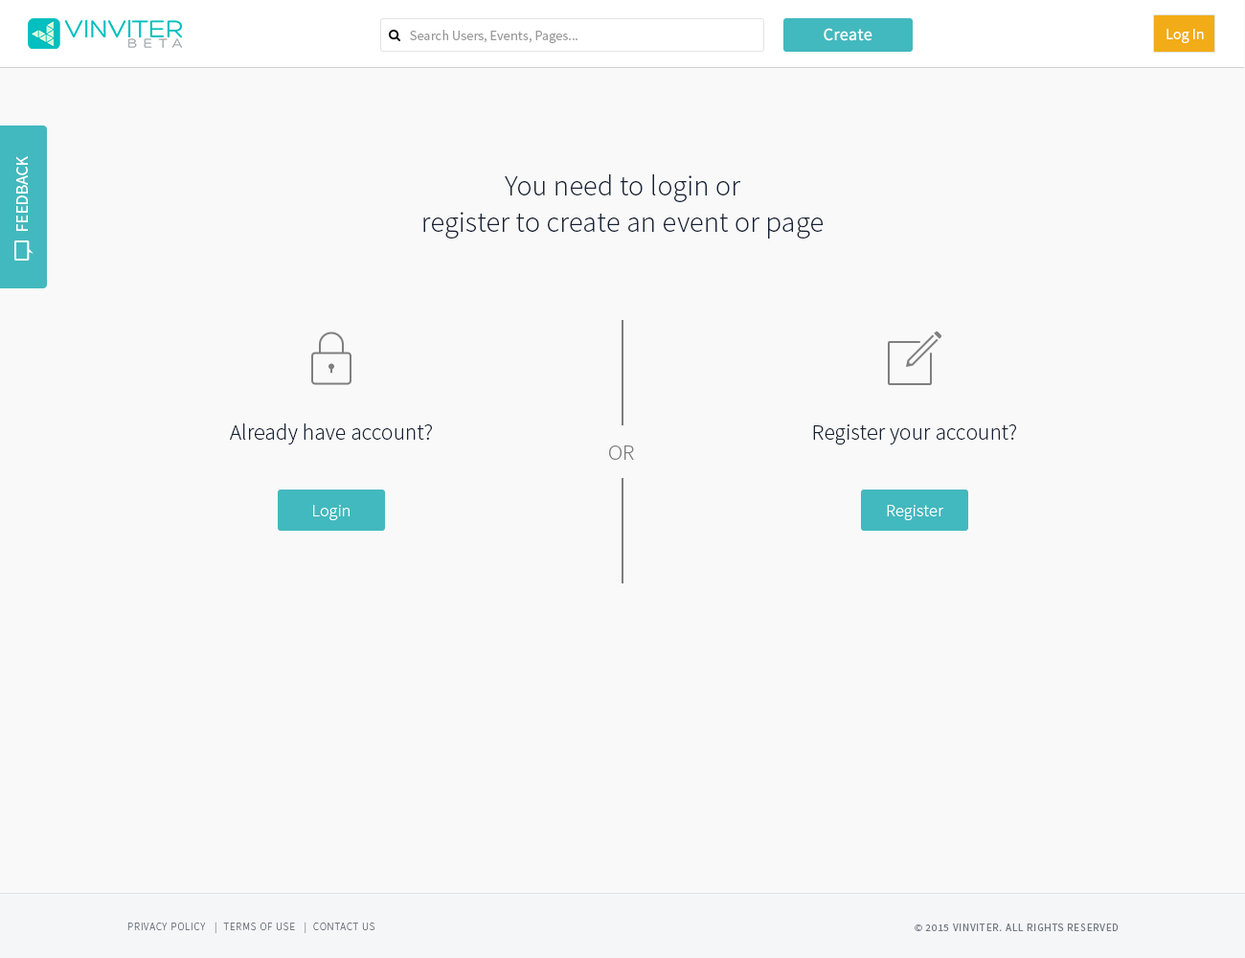
<style>
.page{position:relative;width:1245px;height:958px;background:#f9f9f9}
.page>*{position:absolute;margin:0}
.t1{font:13.7px "SourceSansPro-Regular";color:#999999}
.t2{font:17.2px "SourceSansPro-Regular";letter-spacing:0.02em;color:#ffffff}
.t3{font:15.3px "SourceSansPro-Regular";color:#ffffff}
.t4{font:17.2px "SourceSansPro-Regular";color:#ffffff}
.t5{font:28.7px/17.2px "SourceSansPro-Light";letter-spacing:0.01em;color:#162135}
.t6{font:22px "SourceSansPro-Light";letter-spacing:0.01em;color:#162135}
.t7{font:22px "SourceSansPro-Light";letter-spacing:0.01em;color:#7d7d7d}
.t8{font:17.2px "SourceSansPro-Light";letter-spacing:0.01em;color:#ffffff}
.t9{font:10.5px "SourceSansPro-Light";letter-spacing:0.075em;color:#747a85;text-transform:uppercase}
.t10{font:10.5px "SourceSansPro-Regular";letter-spacing:0.075em;color:#747a85;text-transform:uppercase}
</style>
<div class="page">
<p class="t1" style="left:410px;top:30px;width:168px;height:14px">Search Users, Events, Pages...</p>
<p class="t2" style="left:824px;top:28px;width:48px;height:13px">Create</p>
<p class="t3" style="left:1167px;top:29px;width:37px;height:14px">Log In</p>
<p class="t4" style="left:16px;top:156px;width:12px;height:75px;rotate:-90deg">FEEDBACK</p>
<p class="t5" style="left:423px;top:174px;width:400px;height:64px;text-align:center">You need to login or<br>register to create an event or page</p>
<p class="t6" style="left:230px;top:423px;width:202px;height:21px">Already have account?</p>
<p class="t6" style="left:813px;top:424px;width:203px;height:21px">Register your account?</p>
<p class="t7" style="left:609px;top:445px;width:25px;height:15px">OR</p>
<p class="t8" style="left:313px;top:505px;width:37px;height:15px">Login</p>
<p class="t8" style="left:887px;top:505px;width:57px;height:15px">Register</p>
<p class="t9" style="left:127px;top:921px;width:248px;height:12px">Privacy Policy   |  Terms of Use   |  Contact us</p>
<p class="t10" style="left:915px;top:923px;width:204px;height:8px">© 2015 VINVITER. All rights reserved</p>
</div>
